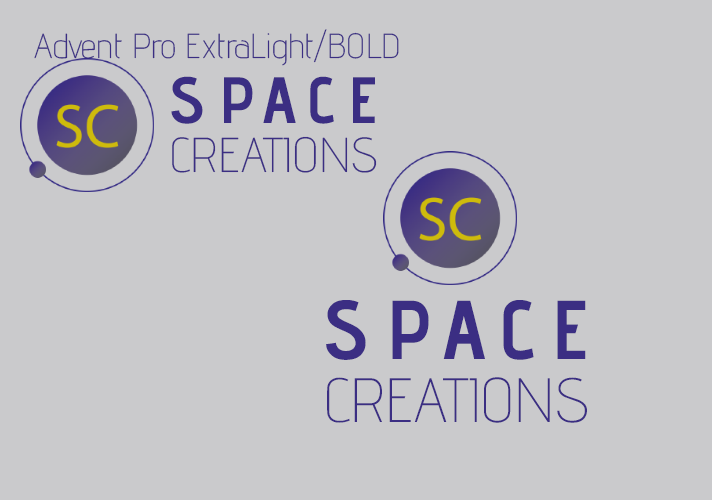
<style>
.page{position:relative;width:712px;height:500px;background:#cacacc}
.page>*{position:absolute;margin:0}
.t1{font:34.7px "AdventPro-ExtraLight";color:#3b2e83}
.t2{font:49px/49px "AdventPro-ExtraLight";color:#3b2e83}
.t3{font:65.3px/49px "AdventPro-Bold";letter-spacing:0.2em;color:#3b2e83}
.t4{font:62.5px/62.5px "AdventPro-ExtraLight";color:#3b2e83}
.t5{font:83.3px/62.5px "AdventPro-Bold";letter-spacing:0.2em;color:#3b2e83}
</style>
<div class="page">
<p class="t1" style="left:34px;top:29px;width:365px;height:37px">Advent Pro ExtraLight/BOLD</p>
<p class="t2" style="left:171px;top:76px;width:206px;height:97px"><span class="t3">SPACE<br></span>CREATIONS</p>
<p class="t4" style="left:326px;top:300px;width:261px;height:123px"><span class="t5">SPACE<br></span>CREATIONS</p>
</div>
